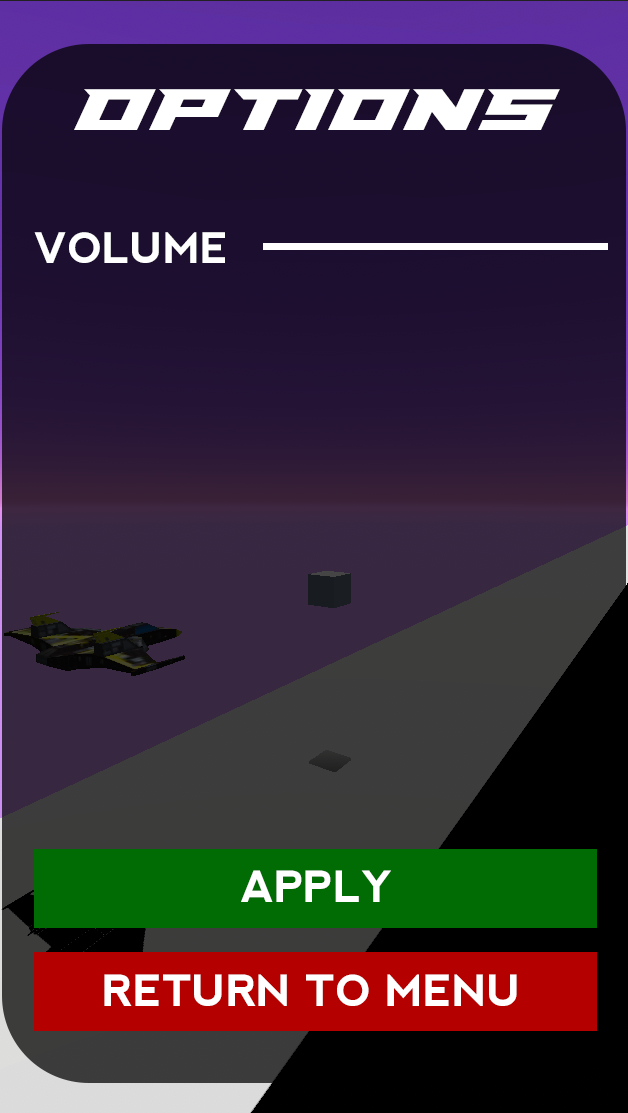
<style>
.page{position:relative;width:628px;height:1113px}
.page>*{position:absolute;margin:0}
.t1{font:63px "PaladinsExpanded";color:#ffffff}
.t2{font:42px "nevis-Bold";color:#ffffff}
.t3{font:43px "nevis-Bold";color:#ffffff}
</style>
<div class="page">
<p class="t1" style="left:74px;top:89px;width:486px;height:41px">OPTIONS</p>
<p class="t2" style="left:34px;top:232px;width:191px;height:31px">VOLUME</p>
<p class="t3" style="left:241px;top:870px;width:150px;height:32px">APPLY</p>
<p class="t3" style="left:104px;top:974px;width:413px;height:32px">RETURN TO MENU</p>
</div>
